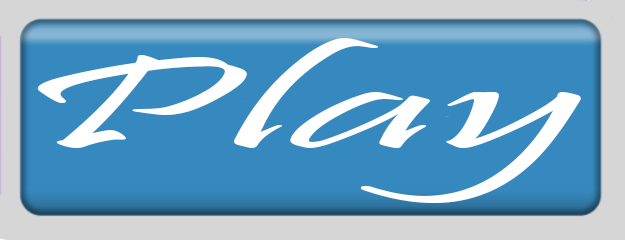
<style>
.page{position:relative;width:625px;height:240px;background:#3689be}
.page>*{position:absolute;margin:0}
.t1{font:133.2px "Pristina-Regular";color:#ffffff;scale:2.79 1}
</style>
<div class="page">
<p class="t1" style="left:37px;top:38px;width:544px;height:165px">Play</p>
</div>
